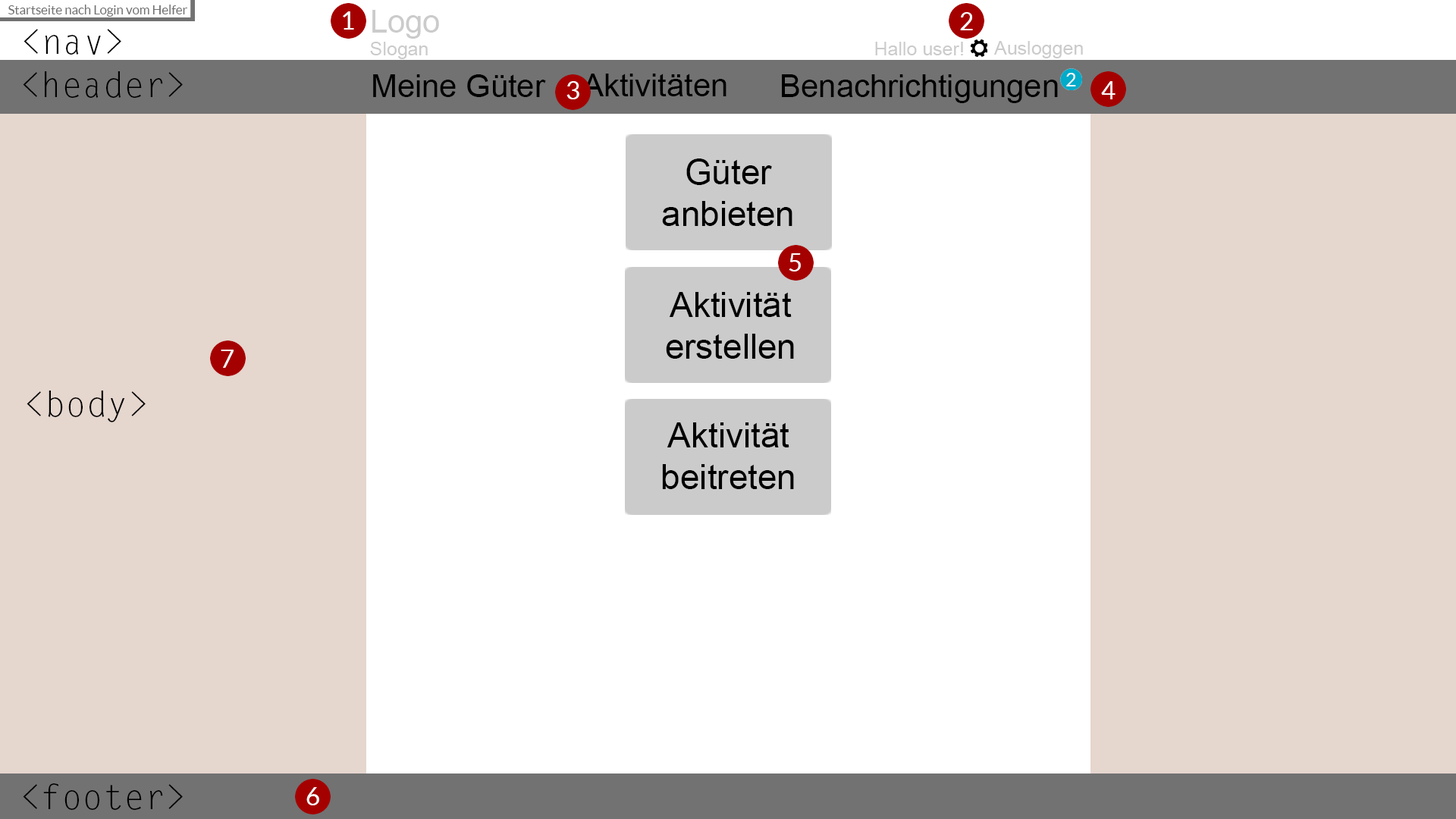
<style>
.page{position:relative;width:1456px;height:819px;background:#e5d6ce}
.page>*{position:absolute;margin:0}
.t1{font:12.6px "Lato-Regular";color:#727272}
.t2{font:25.3px "Lato-Regular";color:#ffffff}
.t3{font:19px "ArialMT";color:#cbcbcb}
.t4{font:31.6px "ArialMT";color:#cbcbcb}
.t5{font:34.8px "LetterGothicStd";color:#000000}
.t6{font:31.6px "ArialMT";color:#000000}
.t7{font:19px "Lato-Regular";color:#ffffff}
.t8{font:34.8px "ArialMT";color:#000000}
</style>
<div class="page">
<p class="t1" style="left:8px;top:5px;width:179px;height:12px">Startseite nach Login vom Helfer</p>
<p class="t2" style="left:343px;top:11px;width:11px;height:19px">1</p>
<p class="t3" style="left:370px;top:10px;width:69px;height:49px"><span class="t4">Logo<br></span>Slogan</p>
<p class="t2" style="left:960px;top:12px;width:13px;height:18px">2</p>
<p class="t5" style="left:24px;top:29px;width:97px;height:26px">&lt;nav&gt;</p>
<p class="t3" style="left:875px;top:42px;width:88px;height:13px">Hallo user!</p>
<p class="t3" style="left:994px;top:41px;width:89px;height:17px">Ausloggen</p>
<p class="t5" style="left:23px;top:71px;width:160px;height:27px">&lt;header&gt;</p>
<p class="t6" style="left:373px;top:74px;width:173px;height:23px">Meine Güter</p>
<p class="t6" style="left:566px;top:74px;width:160px;height:22px">- Aktivitäten</p>
<p class="t6" style="left:782px;top:74px;width:276px;height:29px">Benachrichtigungen</p>
<p class="t7" style="left:1066px;top:73px;width:10px;height:13px">2</p>
<p class="t2" style="left:566px;top:81px;width:13px;height:18px">3</p>
<p class="t2" style="left:1101px;top:81px;width:14px;height:18px">4</p>
<p class="t8" style="left:662px;top:158px;width:130px;height:68px;text-align:center">Güter<br>anbieten</p>
<p class="t2" style="left:789px;top:253px;width:12px;height:18px">5</p>
<p class="t8" style="left:666px;top:292px;width:128px;height:67px;text-align:center">Aktivität<br>erstellen</p>
<p class="t2" style="left:221px;top:350px;width:13px;height:18px">7</p>
<p class="t5" style="left:27px;top:391px;width:119px;height:31px">&lt;body&gt;</p>
<p class="t8" style="left:662px;top:422px;width:132px;height:67px;text-align:center">Aktivität<br>beitreten</p>
<p class="t5" style="left:23px;top:783px;width:160px;height:27px">&lt;footer&gt;</p>
<p class="t2" style="left:306px;top:787px;width:13px;height:18px">6</p>
</div>
